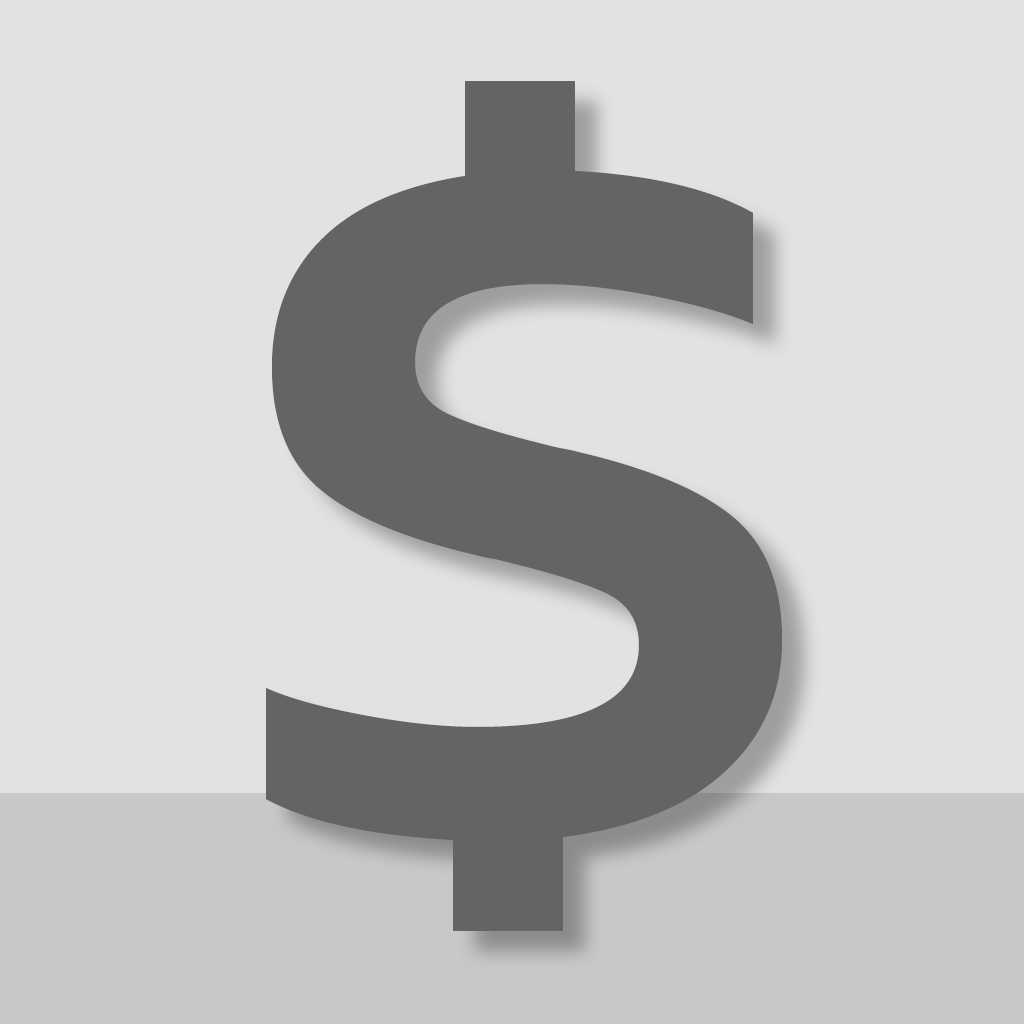
<style>
.page{position:relative;width:1024px;height:1024px;background:#e2e2e2}
.page>*{position:absolute;margin:0}
.t1{font:1000px "AT-Bold";letter-spacing:-0.04em;color:#646464}
</style>
<div class="page">
<p class="t1" style="left:266px;top:81px;width:516px;height:850px">$</p>
</div>
